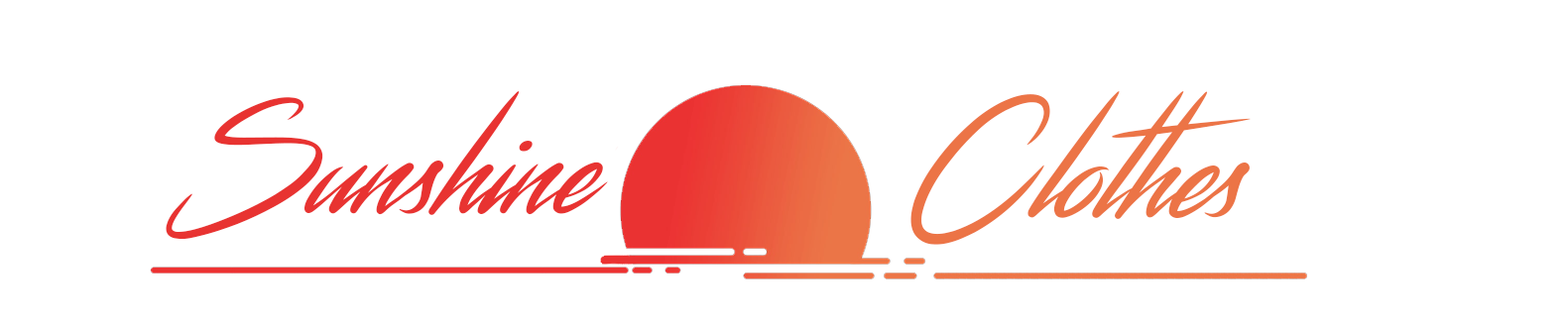
<style>
.page{position:relative;width:1568px;height:329px;background:#ffffff}
.page>*{position:absolute;margin:0}
.t1{font:137.4px "Streamster";color:#e83331}
.t2{font:142px "Streamster";color:#ec7446}
</style>
<div class="page">
<p class="t1" style="left:166px;top:91px;width:442px;height:149px">Sunshine</p>
<p class="t2" style="left:910px;top:91px;width:341px;height:154px">Clothes</p>
</div>
